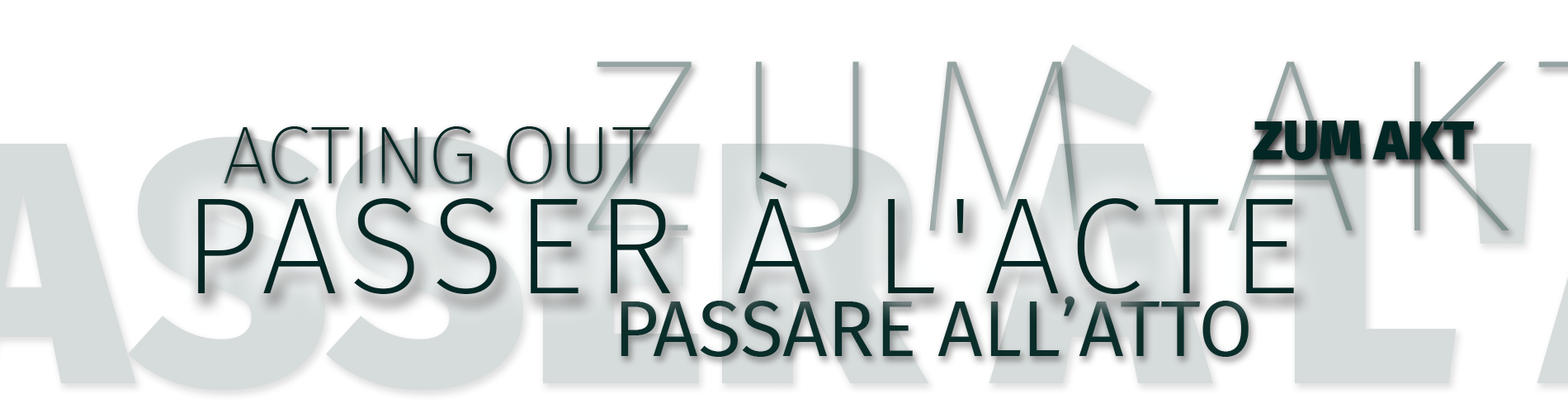
<style>
.page{position:relative;width:1568px;height:413px;background:#ffffff}
.page>*{position:absolute;margin:0}
.t1{font:55px "FiraSans-Heavy";color:#032724;text-transform:uppercase}
.t2{font:82.5px "FiraSans-UltraLight";color:#032724;text-transform:uppercase}
.t3{font:137.5px "FiraSans-ExtraLight";letter-spacing:0.075em;color:#032724;text-transform:uppercase}
.t4{font:79.1px "FiraSans-Book";color:#032724;text-transform:uppercase}
</style>
<div class="page">
<p class="t1" style="left:1253px;top:120px;width:222px;height:40px">Zum Akt</p>
<p class="t2" style="left:224px;top:126px;width:426px;height:58px">Acting Out</p>
<p class="t3" style="left:198px;top:171px;width:1096px;height:123px">Passer à l'acte</p>
<p class="t4" style="left:621px;top:295px;width:628px;height:62px;opacity:0.97">Passare all’atto</p>
</div>
